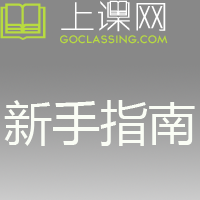
<style>
.page{position:relative;width:200px;height:200px;background:#888888}
.page>*{position:absolute;margin:0}
.t1{font:9.7px "TYPOGRAPHPRO-SemiBold";color:#b8db40;scale:1.03 1}
.t2{font:48px "MicrosoftYaHei";color:#fafdf5}
</style>
<div class="page">
<p class="t1" style="left:60px;top:35px;width:108px;height:9px">GOCLASSING.COM</p>
<p class="t2" style="left:4px;top:100px;width:191px;height:46px">新手指南</p>
</div>
